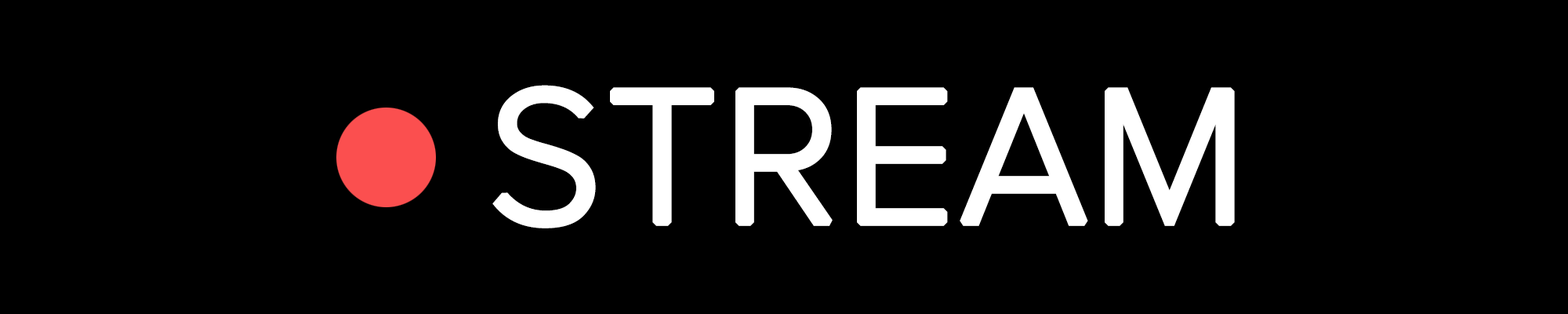
<style>
.page{position:relative;width:1568px;height:314px;background:#000000}
.page>*{position:absolute;margin:0}
.t1{font:196px "ProximaNova-Light";color:#ffffff;font-weight:bold}
</style>
<div class="page">
<p class="t1" style="left:492px;top:85px;width:743px;height:143px">STREAM</p>
</div>
